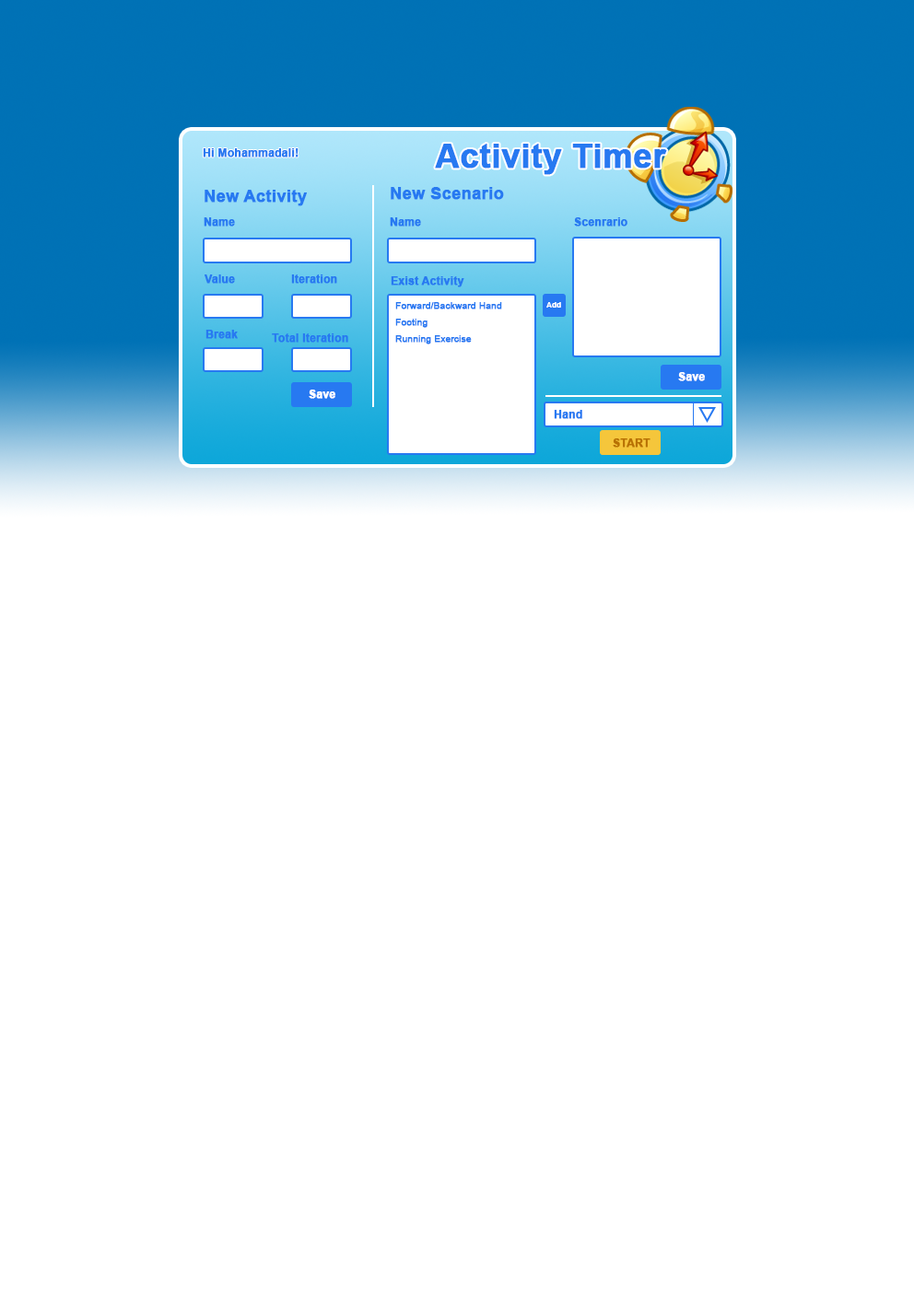
<style>
.page{position:relative;width:914px;height:1305px;background:#ffffff}
.page>*{position:absolute;margin:0}
.t1{font:11.1px "Arial-BoldMT";color:#2779f1;font-weight:bold}
.t2{font:33.2px "Arial-BoldMT";color:#2779f1;font-weight:bold}
.t3{font:16.6px "Arial-BoldMT";color:#2779f1;font-weight:bold}
.t4{font:9.2px/16.6px "ArialMT";color:#2779f1;font-weight:bold}
.t5{font:7.4px "Arial-BoldMT";color:#ffffff;font-weight:bold}
.t6{font:11.1px "Arial-BoldMT";color:#ffffff;font-weight:bold}
.t7{font:11.1px "Arial-BoldMT";color:#b87102;font-weight:bold}
</style>
<div class="page">
<p class="t1" style="left:203px;top:148px;width:95px;height:9px">Hi Mohammadali!</p>
<p class="t2" style="left:435px;top:144px;width:232px;height:31px">Activity Timer</p>
<p class="t3" style="left:204px;top:190px;width:103px;height:16px">New Activity</p>
<p class="t3" style="left:391px;top:187px;width:113px;height:13px">New Scenario</p>
<p class="t1" style="left:204px;top:217px;width:31px;height:10px">Name</p>
<p class="t1" style="left:390px;top:217px;width:31px;height:10px">Name</p>
<p class="t1" style="left:574px;top:217px;width:53px;height:10px">Scenrario</p>
<p class="t1" style="left:204px;top:274px;width:31px;height:10px">Value</p>
<p class="t1" style="left:291px;top:274px;width:46px;height:10px">Iteration</p>
<p class="t1" style="left:391px;top:276px;width:73px;height:11px">Exist Activity</p>
<p class="t4" style="left:395px;top:302px;width:107px;height:42px">Forward/Backward Hand<br>Footing<br>Running Exercise</p>
<p class="t5" style="left:546px;top:302px;width:15px;height:6px">Add</p>
<p class="t1" style="left:205px;top:330px;width:33px;height:9px">Break</p>
<p class="t1" style="left:272px;top:333px;width:76px;height:10px">Total Iteration</p>
<p class="t6" style="left:678px;top:372px;width:27px;height:9px">Save</p>
<p class="t6" style="left:309px;top:390px;width:26px;height:9px">Save</p>
<p class="t1" style="left:554px;top:410px;width:28px;height:9px">Hand</p>
<p class="t7" style="left:612px;top:438px;width:38px;height:10px">START</p>
</div>
